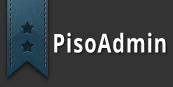
<style>
.page{position:relative;width:173px;height:87px;background:#333333}
.page>*{position:absolute;margin:0}
.t1{font:26px "OpenSans-Bold";letter-spacing:0.05em;color:#ffffff;scale:0.77 1}
</style>
<div class="page">
<p class="t1" style="left:54px;top:32px;width:112px;height:21px">PisoAdmin</p>
</div>
